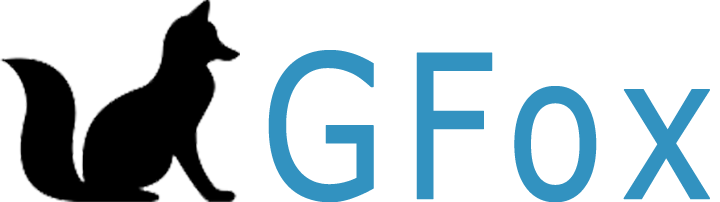
<style>
.page{position:relative;width:720px;height:202px;background:#ffffff}
.page>*{position:absolute;margin:0}
.t1{font:200px "Verdana";letter-spacing:0.08em;color:#3292c0;font-weight:bold;scale:0.8 1}
</style>
<div class="page">
<p class="t1" style="left:268px;top:50px;width:442px;height:153px">GFox</p>
</div>
